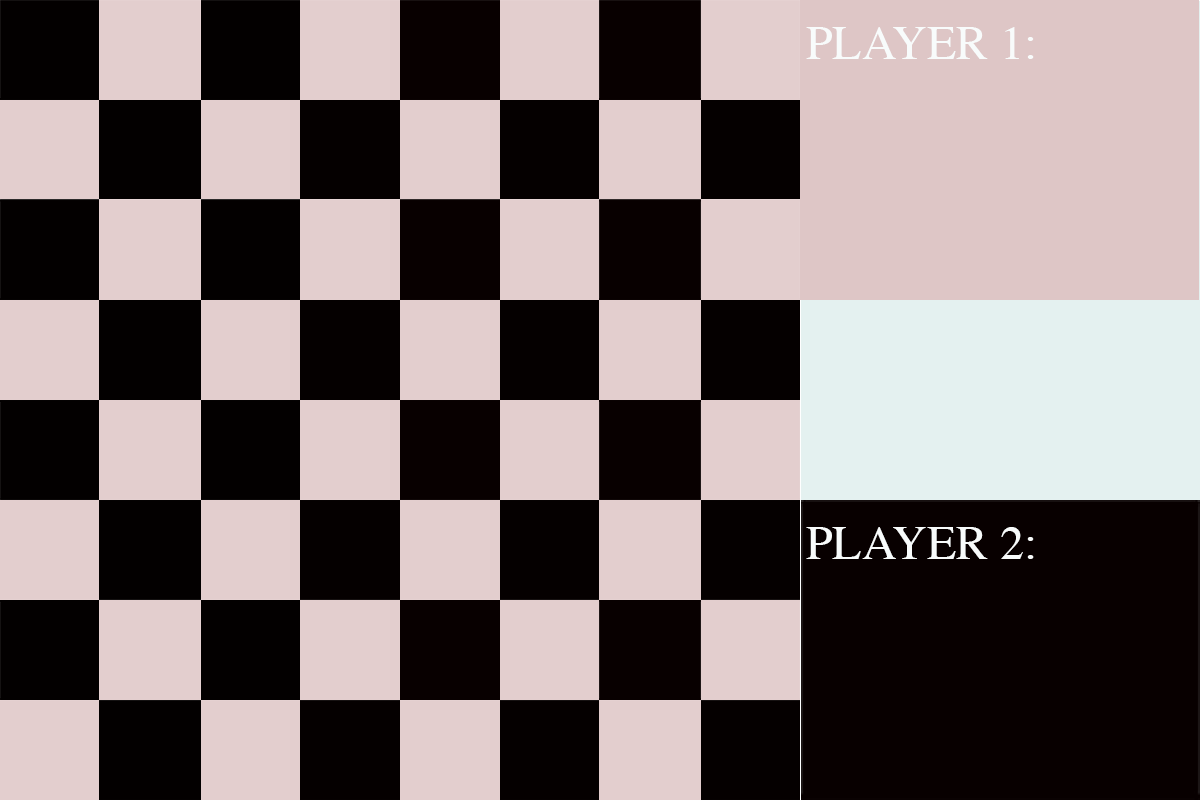
<style>
.page{position:relative;width:1200px;height:800px;background:#e3cece}
.page>*{position:absolute;margin:0}
.t1{font:48px "Times-Roman";color:#f8fbfb;text-transform:uppercase}
</style>
<div class="page">
<p class="t1" style="left:806px;top:27px;width:228px;height:32px">Player 1:</p>
<p class="t1" style="left:806px;top:527px;width:228px;height:32px">Player 2:</p>
</div>
